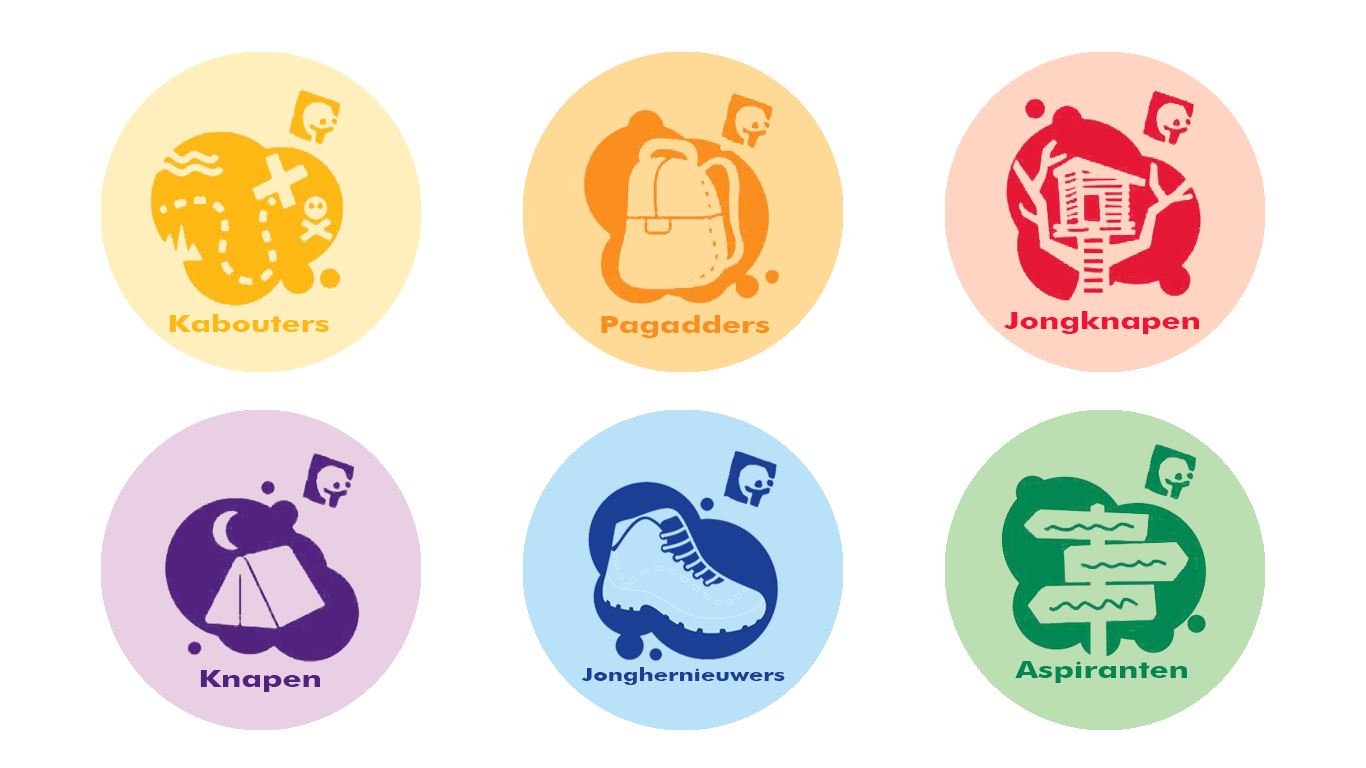
<style>
.page{position:relative;width:1366px;height:768px;background:#ffffff}
.page>*{position:absolute;margin:0}
.t1{font:24px "Futura-Bold";color:#fdb813;scale:1.3 1}
.t2{font:24px "Futura-Bold";color:#f98d1e;scale:1.3 1}
.t3{font:24px "Futura-Bold";color:#f21137;scale:1.3 1}
.t4{font:24px "Futura-Bold";color:#028752;scale:1.3 1}
.t5{font:24px "Futura-Bold";color:#51227e;scale:1.3 1}
.t6{font:18px "Futura-Bold";color:#1b3f95;scale:1.3 1}
</style>
<div class="page">
<p class="t1" style="left:169px;top:314px;width:160px;height:18px">Kabouters</p>
<p class="t2" style="left:601px;top:315px;width:169px;height:23px">Pagadders</p>
<p class="t3" style="left:1004px;top:311px;width:195px;height:23px">Jongknapen</p>
<p class="t4" style="left:1015px;top:661px;width:172px;height:22px">Aspiranten</p>
<p class="t5" style="left:200px;top:670px;width:120px;height:22px">Knapen</p>
<p class="t6" style="left:581px;top:667px;width:204px;height:18px">Jonghernieuwers</p>
</div>
